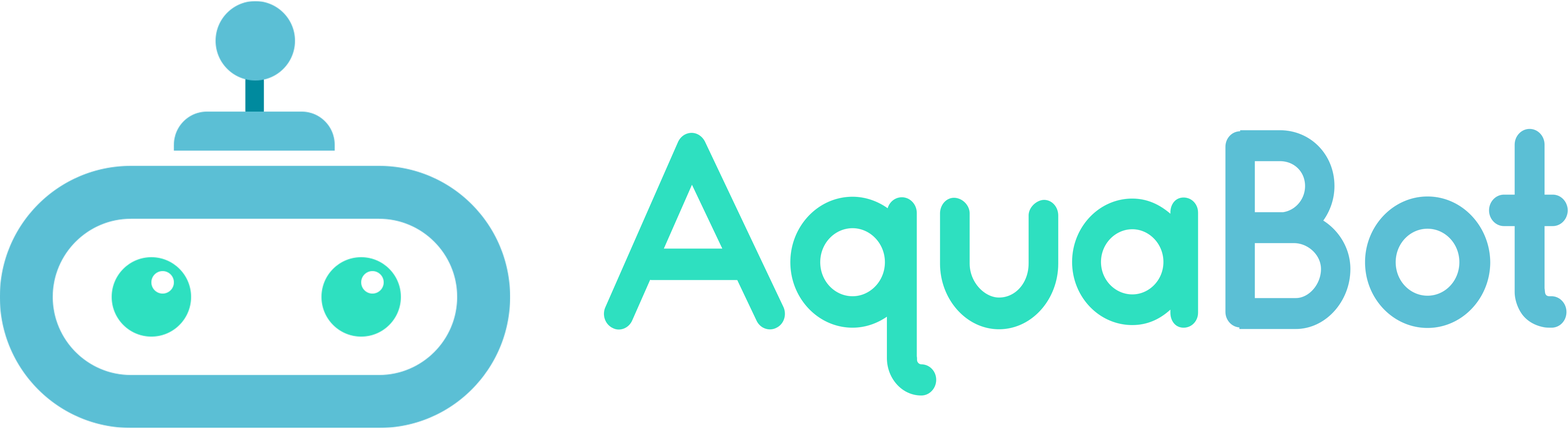
<style>
.page{position:relative;width:1568px;height:429px;background:#ffffff}
.page>*{position:absolute;margin:0}
.t1{font:262px "Somatic-Rounded";color:#2ee0c0;scale:0.95 1}
.t2{font:262px "Somatic-Rounded";color:#5bbfd5;scale:0.95 1}
</style>
<div class="page">
<p class="t1" style="left:604px;top:129px;width:964px;height:267px">Aqua<span class="t2">Bot</span></p>
</div>
